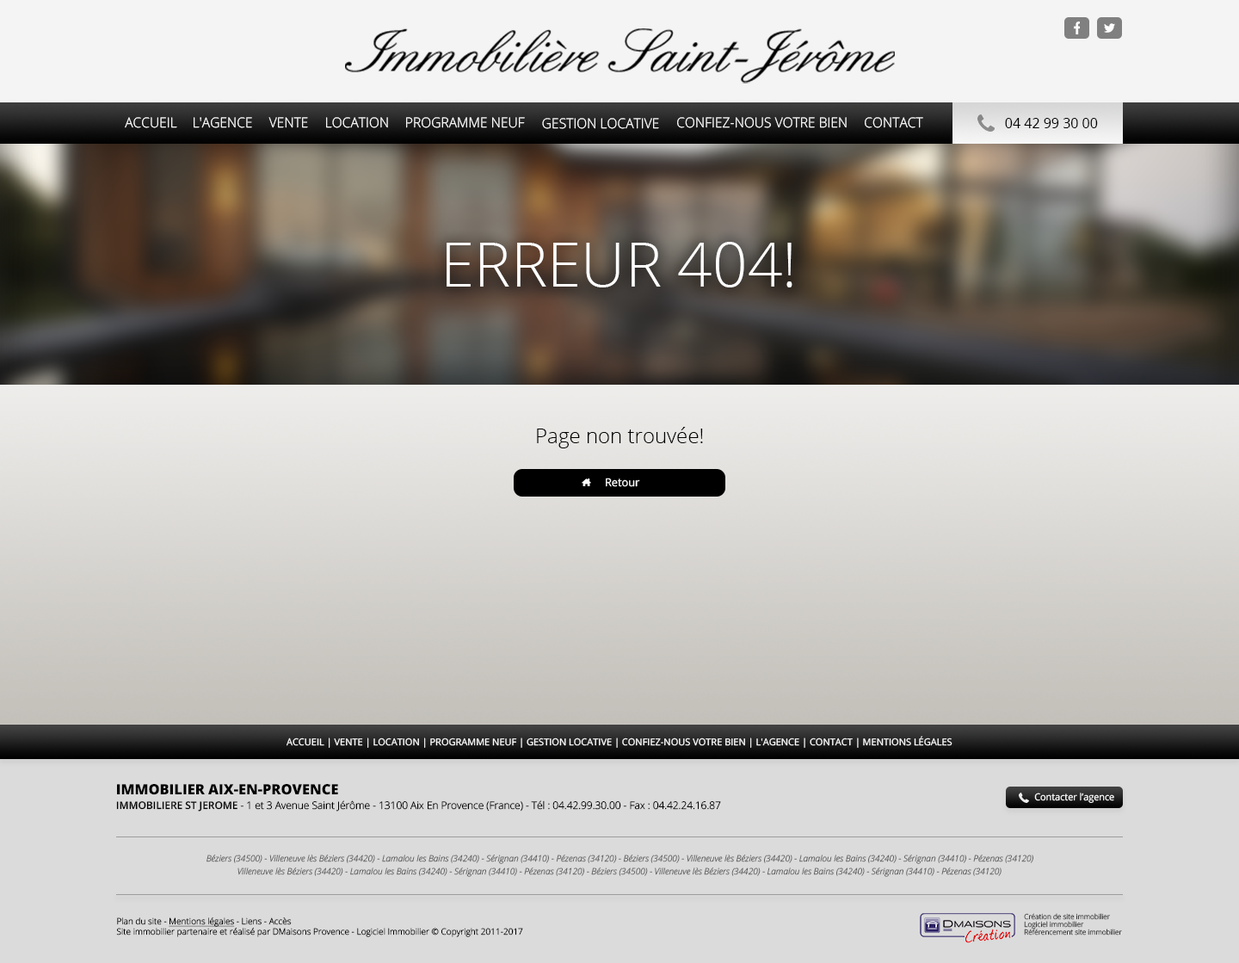
<style>
.page{position:relative;width:1239px;height:963px}
.page>*{position:absolute;margin:0}
.t1{font:13.8px "OpenSans-Light";color:#ffffff;text-transform:uppercase}
.t2{font:13.8px "OpenSans";color:#000000;text-transform:uppercase}
.t3{font:61.3px "OpenSans-Light";color:#ffffff;text-transform:uppercase}
.t4{font:20.6px "OpenSans-Light";color:#000000}
.t5{font:11px "OpenSans";color:#ffffff}
.t6{font:9.5px "OpenSans";color:#ffffff;text-transform:uppercase}
.t7{font:10.2px/14.1px "OpenSans-Light";color:#000000}
.t8{font:14.1px/22px "OpenSans-Extrabold";color:#000000}
.t9{font:10.2px/14.1px "OpenSans-Semibold";color:#000000}
.t10{font:9.7px "OpenSans";color:#ffffff;scale:0.96 1}
.t11{font:8.6px "OpenSansLight-Italic";color:#626262}
.t12{font:8.6px/10.2px "OpenSans-Light";color:#010101}
.t13{font:8.6px/10.2px "OpenSans-Light";color:#010101;text-decoration:underline}
.t14{font:7.1px/7.9px "OpenSans-Light";color:#3b3b3b}
</style>
<div class="page">
<p class="t1" style="left:125px;top:117px;width:52px;height:11px">Accueil</p>
<p class="t1" style="left:194px;top:117px;width:58px;height:11px">L'agence</p>
<p class="t1" style="left:268px;top:117px;width:40px;height:11px">VENTE</p>
<p class="t1" style="left:326px;top:117px;width:62px;height:11px">LOCATION</p>
<p class="t1" style="left:406px;top:117px;width:119px;height:11px">Programme neuf</p>
<p class="t1" style="left:542px;top:118px;width:117px;height:11px">GESTION LOCATIVE</p>
<p class="t1" style="left:677px;top:117px;width:169px;height:11px">Confiez-nous votre bien</p>
<p class="t1" style="left:865px;top:117px;width:58px;height:11px">Contact</p>
<p class="t2" style="left:1005px;top:118px;width:93px;height:10px">04 42 99 30 00</p>
<p class="t3" style="left:446px;top:242px;width:346px;height:45px">ERREUR 404!</p>
<p class="t4" style="left:537px;top:427px;width:166px;height:21px">Page non trouvée!</p>
<p class="t5" style="left:606px;top:477px;width:34px;height:10px">Retour</p>
<p class="t6" style="left:286px;top:736px;width:666px;height:12px">ACCUEIL | VENTE | LOCATION | PROGRAMME NEUF | GESTION LOCATIVE | CONFIEZ-NOUS VOTRE BIEN | L'AGENCE | CONTACT | MENTIONS LÉGALES</p>
<p class="t7" style="left:116px;top:784px;width:605px;height:27px"><span class="t8">IMMOBILIER AIX-EN-PROVENCE<br></span><span class="t9">IMMOBILIERE ST JEROME</span> - 1 et 3 Avenue Saint Jérôme - 13100 Aix En Provence (France) - Tél : 04.42.99.30.00 - Fax : 04.42.24.16.87</p>
<p class="t10" style="left:1034px;top:792px;width:80px;height:11px">Contacter l’agence</p>
<p class="t11" style="left:206px;top:854px;width:827px;height:10px">Béziers (34500) - Villeneuve lès Béziers (34420) - Lamalou les Bains (34240) - Sérignan (34410) - Pézenas (34120) - Béziers (34500) - Villeneuve lès Béziers (34420) - Lamalou les Bains (34240) - Sérignan (34410) - Pézenas (34120)</p>
<p class="t11" style="left:237px;top:867px;width:764px;height:10px">Villeneuve lès Béziers (34420) - Lamalou les Bains (34240) - Sérignan (34410) - Pézenas (34120) - Béziers (34500) - Villeneuve lès Béziers (34420) - Lamalou les Bains (34240) - Sérignan (34410) - Pézenas (34120)</p>
<p class="t12" style="left:116px;top:917px;width:407px;height:20px">Plan du site - <span class="t13">Mentions légales</span> - Liens - Accès <br>Site immobilier partenaire et réalisé par DMaisons Provence - Logiciel Immobilier © Copyright 2011-2017</p>
<p class="t14" style="left:1024px;top:913px;width:98px;height:22px">Création de site immobilier<br>Logiciel immobilier <br>Référencement site immobilier</p>
</div>
